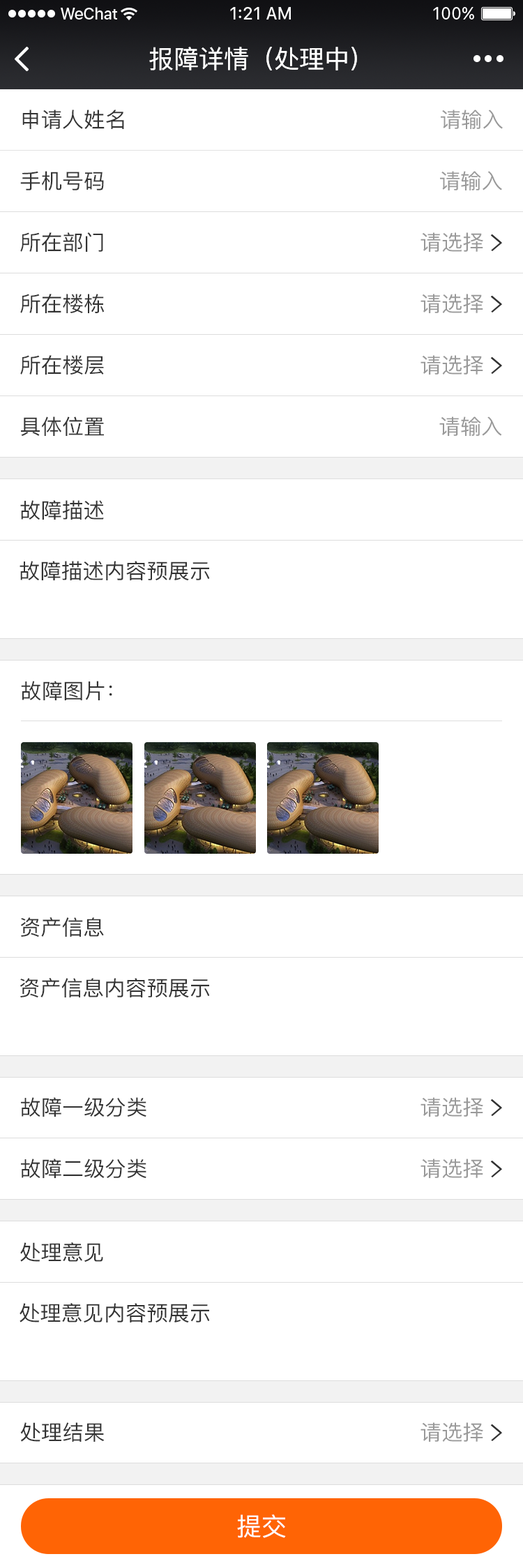
<style>
.page{position:relative;width:523px;height:1568px;background:#ffffff}
.page>*{position:absolute;margin:0}
.t1{font:25.1px "PingFang-SC-Medium";color:#ffffff}
.t2{font:20.9px "PingFang-SC-Medium";color:#333333}
.t3{font:20.9px "PingFang-SC-Medium";color:#999999}
</style>
<div class="page">
<p class="t1" style="left:149px;top:47px;width:208px;height:23px">报障详情（处理中）</p>
<p class="t2" style="left:22px;top:110px;width:102px;height:19px">申请人姓名</p>
<p class="t3" style="left:441px;top:110px;width:62px;height:19px">请输入</p>
<p class="t2" style="left:20px;top:171px;width:84px;height:19px">手机号码</p>
<p class="t3" style="left:440px;top:171px;width:62px;height:19px">请输入</p>
<p class="t2" style="left:20px;top:232px;width:83px;height:20px">所在部门</p>
<p class="t3" style="left:421px;top:232px;width:62px;height:20px">请选择</p>
<p class="t2" style="left:20px;top:294px;width:85px;height:19px">所在楼栋</p>
<p class="t3" style="left:421px;top:294px;width:62px;height:19px">请选择</p>
<p class="t2" style="left:20px;top:355px;width:84px;height:20px">所在楼层</p>
<p class="t3" style="left:421px;top:355px;width:62px;height:20px">请选择</p>
<p class="t2" style="left:21px;top:416px;width:83px;height:20px">具体位置</p>
<p class="t3" style="left:439px;top:416px;width:63px;height:20px">请输入</p>
<p class="t2" style="left:20px;top:500px;width:84px;height:20px">故障描述</p>
<p class="t2" style="left:20px;top:561px;width:190px;height:20px">故障描述内容预展示</p>
<p class="t2" style="left:21px;top:681px;width:91px;height:19px">故障图片：</p>
<p class="t2" style="left:21px;top:917px;width:83px;height:20px">资产信息</p>
<p class="t2" style="left:20px;top:978px;width:190px;height:20px">资产信息内容预展示</p>
<p class="t2" style="left:21px;top:1097px;width:125px;height:20px">故障一级分类</p>
<p class="t3" style="left:421px;top:1097px;width:62px;height:20px">请选择</p>
<p class="t2" style="left:21px;top:1159px;width:125px;height:19px">故障二级分类</p>
<p class="t3" style="left:421px;top:1159px;width:62px;height:19px">请选择</p>
<p class="t2" style="left:20px;top:1242px;width:83px;height:20px">处理意见</p>
<p class="t2" style="left:20px;top:1303px;width:190px;height:20px">处理意见内容预展示</p>
<p class="t2" style="left:20px;top:1422px;width:85px;height:20px">处理结果</p>
<p class="t3" style="left:421px;top:1422px;width:62px;height:20px">请选择</p>
<p class="t1" style="left:237px;top:1514px;width:49px;height:24px">提交</p>
</div>
